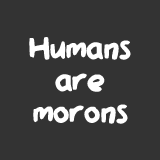
<style>
.page{position:relative;width:160px;height:160px;background:#333333}
.page>*{position:absolute;margin:0}
.t1{font:35.9px/31.9px "QAReports";color:#ffffff}
</style>
<div class="page">
<p class="t1" style="left:29px;top:37px;width:102px;height:87px;text-align:center">Humans<br>are<br>morons</p>
</div>
